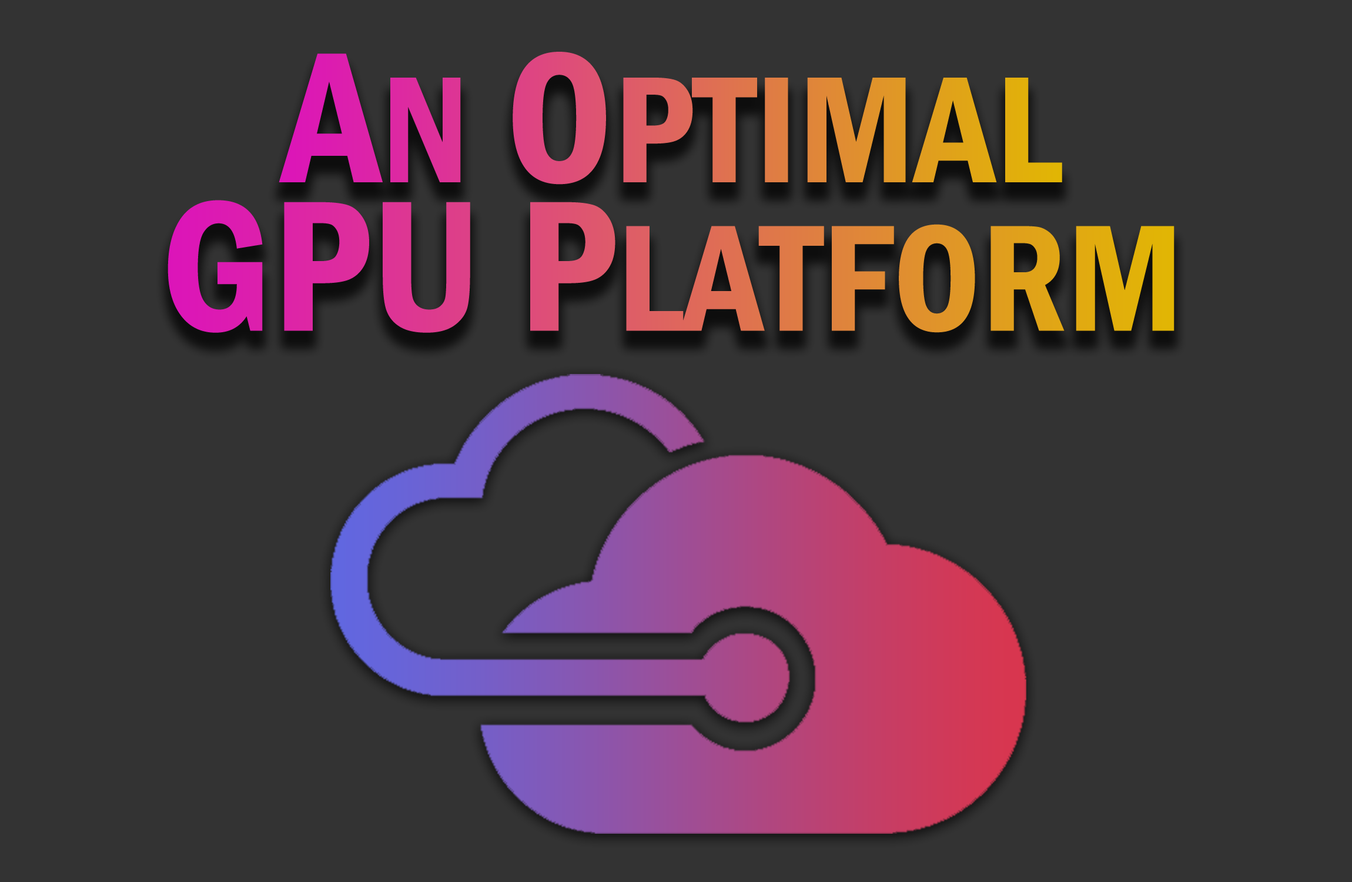
<style>
.page{position:relative;width:1352px;height:882px;background:#333333}
.page>*{position:absolute;margin:0}
.t1{font:156.8px "FranklinGothic-DemiCond"}
.t2{font:192.7px "FranklinGothic-DemiCond"}
</style>
<div class="page">
<p class="t1" style="left:279px;top:52px;width:783px;height:133px"><span class="t2">A</span>N<span class="t2"> O</span>PTIMAL</p>
<p class="t1" style="left:168px;top:200px;width:1007px;height:133px"><span class="t2">GPU P</span>LATFORM</p>
</div>
